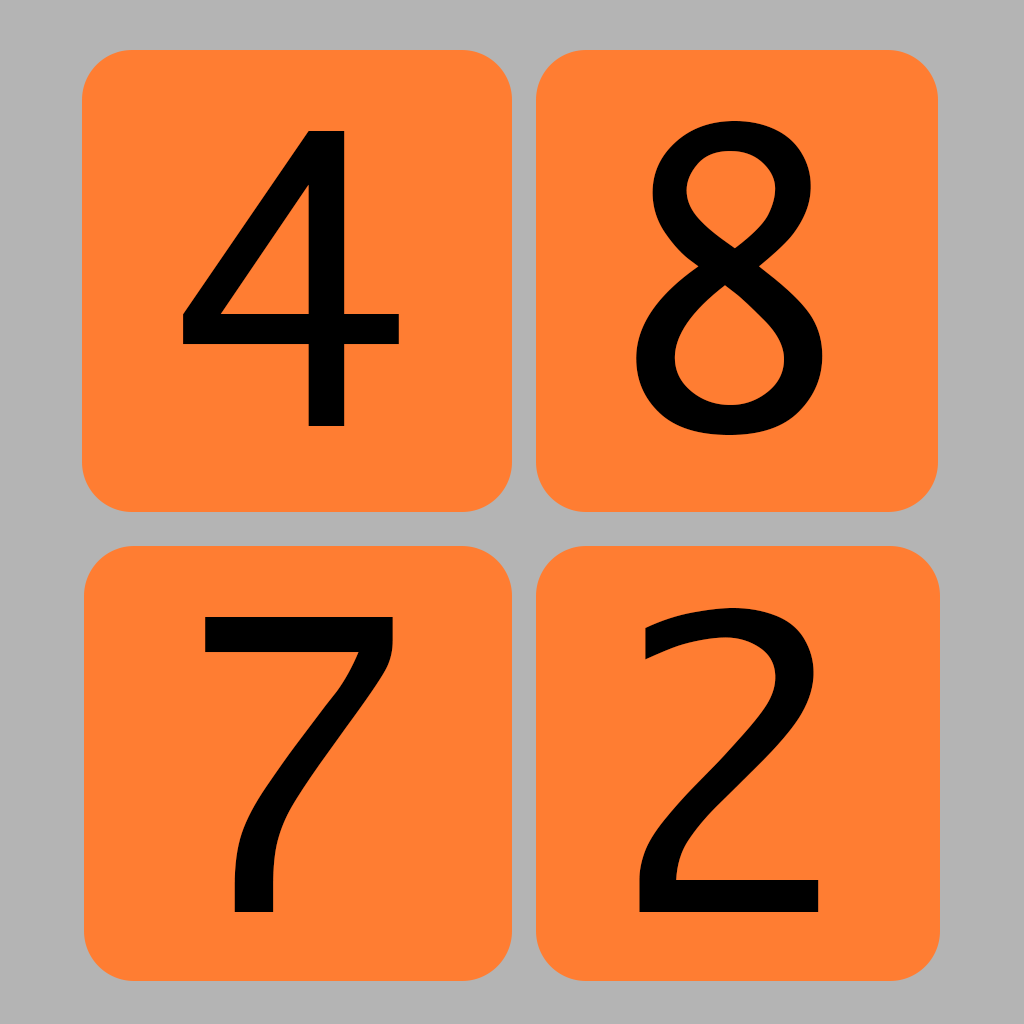
<style>
.page{position:relative;width:1024px;height:1024px;background:#ff7d32}
.page>*{position:absolute;margin:0}
.t1{font:389.9px "Ayuthaya";color:#000000}
</style>
<div class="page">
<p class="t1" style="left:636px;top:121px;width:187px;height:314px">8</p>
<p class="t1" style="left:183px;top:131px;width:216px;height:295px">4</p>
<p class="t1" style="left:205px;top:617px;width:188px;height:295px">7</p>
<p class="t1" style="left:639px;top:608px;width:180px;height:304px">2</p>
</div>
